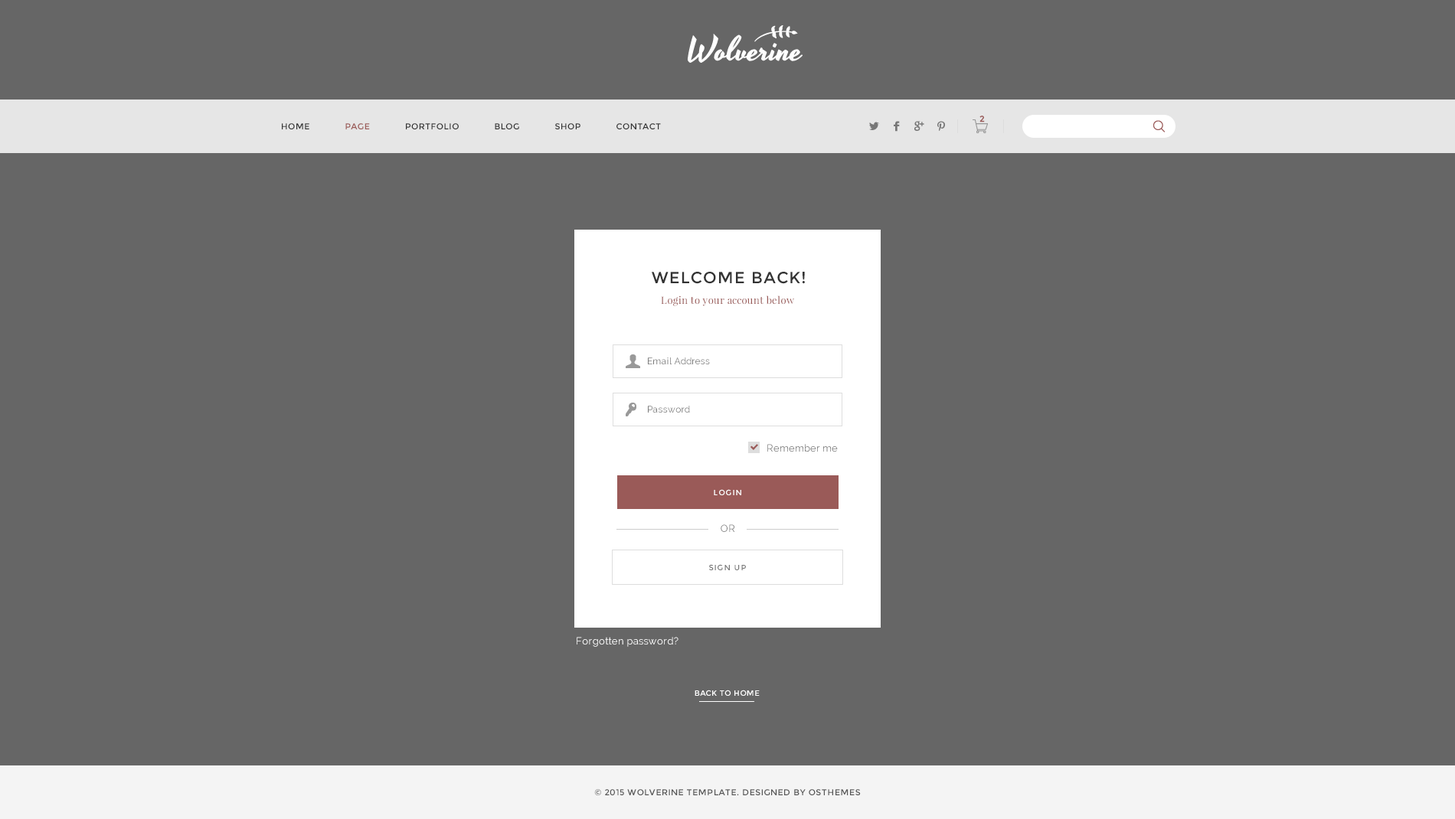
<style>
.page{position:relative;width:1455px;height:819px;background:#666666}
.page>*{position:absolute;margin:0}
.t1{font:8.4px "Montserrat-Regular";letter-spacing:0.05em;color:#333333}
.t2{font:8.4px "Montserrat-Regular";letter-spacing:0.05em;color:#9b5a57}
.t3{font:8.4px "Montserrat-Regular";color:#9a5a58;font-weight:bold}
.t4{font:16.1px "Montserrat-Regular";letter-spacing:0.05em;color:#333333}
.t5{font:10px "PlayfairDisplay-Regular";letter-spacing:0.02em;color:#9a5a58}
.t6{font:9.2px "Raleway";letter-spacing:0.02em;color:#777777}
.t7{font:10px "Raleway";color:#777777}
.t8{font:7.7px "Montserrat-Regular";letter-spacing:0.1em;color:#ffffff}
.t9{font:10px "Raleway";letter-spacing:0.05em;color:#777777}
.t10{font:7.7px "Montserrat-Regular";letter-spacing:0.1em;color:#777777}
.t11{font:10px "Raleway";letter-spacing:0.02em;color:#ffffff}
.t12{font:7.7px "Montserrat-Regular";letter-spacing:0.04em;color:#ffffff}
.t13{font:8.4px "Montserrat-Regular";letter-spacing:0.05em;color:#555555}
</style>
<div class="page">
<p class="t1" style="left:282px;top:123px;width:379px;height:6px">HOME      <span class="t2">PAGE</span>      PORTFOLIO      BLOG      SHOP      CONTACT</p>
<p class="t3" style="left:980px;top:116px;width:5px;height:7px">2</p>
<p class="t4" style="left:652px;top:272px;width:153px;height:12px">WELCOME BACK!</p>
<p class="t5" style="left:661px;top:296px;width:133px;height:10px">Login to your account below</p>
<p class="t6" style="left:648px;top:358px;width:62px;height:7px">Email Address</p>
<p class="t6" style="left:648px;top:406px;width:42px;height:7px">Password</p>
<p class="t7" style="left:767px;top:444px;width:71px;height:9px">Remember me</p>
<p class="t8" style="left:714px;top:489px;width:27px;height:7px">LOGIN</p>
<p class="t9" style="left:721px;top:525px;width:14px;height:7px">OR</p>
<p class="t10" style="left:709px;top:564px;width:37px;height:7px">SIGN UP</p>
<p class="t11" style="left:577px;top:637px;width:102px;height:10px">Forgotten password?</p>
<p class="t12" style="left:695px;top:690px;width:65px;height:6px">BACK TO HOME</p>
<p class="t13" style="left:594px;top:790px;width:267px;height:6px">© 2015 WOLVERINE TEMPLATE. DESIGNED BY OSTHEMES</p>
</div>
